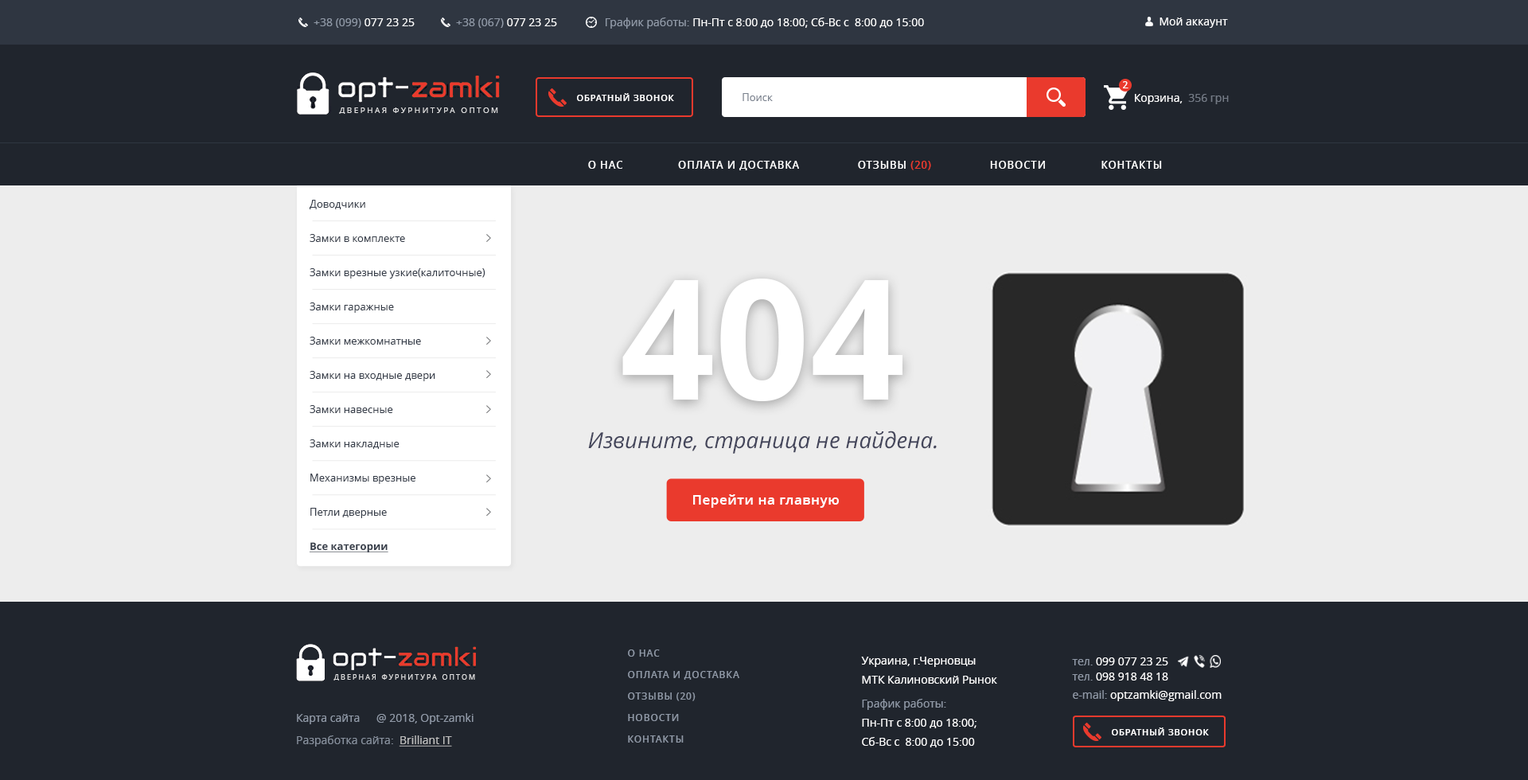
<style>
.page{position:relative;width:1528px;height:780px;background:#ededed}
.page>*{position:absolute;margin:0}
.t1{font:11.1px "OpenSans";color:#ffffff}
.t2{font:11.1px "OpenSans";color:#9099a7}
.t3{font:9.6px "OpenSans-Semibold";color:#ffffff}
.t4{font:8.8px "OpenSans-Semibold";letter-spacing:0.075em;color:#ffffff;text-transform:uppercase}
.t5{font:10.3px "OpenSans";color:#79818d}
.t6{font:11.1px "OpenSans";color:#747b86}
.t7{font:7.9px "OpenSans";letter-spacing:0.26em;color:#dfdfe0;text-transform:uppercase}
.t8{font:10.3px "OpenSans-Semibold";letter-spacing:0.07em;color:#ffffff;text-transform:uppercase}
.t9{font:10.3px "OpenSans-Semibold";letter-spacing:0.07em;color:#ea3a2d;text-transform:uppercase}
.t10{font:10.4px/34.3px "OpenSans";color:#373e4a}
.t11{font:10.4px/34.3px "OpenSans-Bold";color:#373e4a;text-decoration:underline}
.t12{font:167.5px "OpenSans-Bold";color:#ffffff}
.t13{font:22.1px "OpenSans-Italic";color:#44465b}
.t14{font:13.2px "OpenSans-Semibold";letter-spacing:0.04em;color:#ffffff}
.t15{font:9.6px/21.5px "OpenSans-Semibold";letter-spacing:0.07em;color:#9099a7;text-transform:uppercase}
.t16{font:11.1px/19.1px "OpenSans";color:#ffffff}
.t17{font:11.1px/23.9px "OpenSans";color:#9099a7}
.t18{font:11.1px/18.3px "OpenSans";color:#ffffff}
.t19{font:11.1px/18.3px "OpenSans";color:#9099a7}
.t20{font:11.1px/15.1px "OpenSans";color:#ffffff}
.t21{font:11.1px/15.1px "OpenSans";color:#9099a7}
.t22{font:6.9px "OpenSans";letter-spacing:0.26em;color:#dfdfe0;text-transform:uppercase}
.t23{font:11.1px "OpenSans";color:#868f9c}
.t24{font:11.1px "OpenSans";color:#bebebe;text-decoration:underline}
</style>
<div class="page">
<p class="t1" style="left:606px;top:18px;width:318px;height:11px"><span class="t2">График работы: </span>Пн-Пт с 8:00 до 18:00; Сб-Вс с  8:00 до 15:00</p>
<p class="t1" style="left:1160px;top:18px;width:68px;height:10px">Мой аккаунт</p>
<p class="t2" style="left:314px;top:18px;width:101px;height:10px">+38 (099)<span class="t1"> 077 23 25</span></p>
<p class="t2" style="left:456px;top:18px;width:101px;height:10px">+38 (067)<span class="t1"> 077 23 25</span></p>
<p class="t3" style="left:1123px;top:81px;width:6px;height:7px">2</p>
<p class="t4" style="left:577px;top:93px;width:97px;height:8px">Обратный звонок</p>
<p class="t5" style="left:743px;top:93px;width:30px;height:8px">Поиск</p>
<p class="t1" style="left:1135px;top:94px;width:94px;height:10px">Корзина,  <span class="t6">356 грн</span></p>
<p class="t7" style="left:339px;top:107px;width:159px;height:7px">Дверная фурнитура оптом</p>
<p class="t8" style="left:588px;top:161px;width:574px;height:9px">о нас                оплата и доставка                 Отзывы <span class="t9">(20) </span>                НОВОСТИ                Контакты</p>
<p class="t10" style="left:309px;top:200px;width:177px;height:353px">Доводчики<br>Замки в комплекте<br>Замки врезные узкие(калиточные)<br>Замки гаражные<br>Замки межкомнатные<br>Замки на входные двери<br>Замки навесные<br>Замки накладные<br>Механизмы врезные<br>Петли дверные<br><span class="t11">Все категории<br></span>Ручки защолка кноб<br>Ручки на планке<br>Ручки на розете<br>Сердцевины<br>Скобяные изделия<br>Уплотнитель<br>Хомуты пластиковые<br>Шпингалеты и дверные аксессуары</p>
<p class="t12" style="left:623px;top:278px;width:280px;height:123px">404</p>
<p class="t13" style="left:588px;top:431px;width:349px;height:23px">Извините, страница не найдена.</p>
<p class="t14" style="left:693px;top:494px;width:146px;height:14px">Перейти на главную</p>
<p class="t15" style="left:628px;top:650px;width:112px;height:93px">о нас<br>оплата и доставка<br>Отзывы (20)<br>НОВОСТИ<br>Контакты</p>
<p class="t16" style="left:861px;top:657px;width:136px;height:91px">Украина, г.Черновцы<br>МТК Калиновский Рынок<br><span class="t17">График работы:<br></span>Пн-Пт с 8:00 до 18:00;<br>Сб-Вс с  8:00 до 15:00</p>
<p class="t18" style="left:1072px;top:658px;width:150px;height:43px"><span class="t19">тел.</span> 099 077 23 2<span class="t20">5<br></span><span class="t21">тел.</span><span class="t20"> 098 918 48 18<br></span><span class="t19">e-mail: </span>optzamki@gmail.com</p>
<p class="t22" style="left:334px;top:674px;width:141px;height:7px">Дверная фурнитура оптом</p>
<p class="t2" style="left:377px;top:713px;width:97px;height:11px">@ 2018, Opt-zamki</p>
<p class="t2" style="left:297px;top:714px;width:63px;height:10px">Карта сайта</p>
<p class="t23" style="left:297px;top:736px;width:155px;height:11px">Разработка сайта:  <span class="t24">Brilliant IT</span></p>
<p class="t4" style="left:1112px;top:728px;width:97px;height:8px">Обратный звонок</p>
</div>
